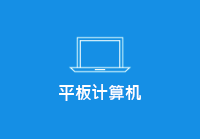
<style>
.page{position:relative;width:200px;height:139px;background:#158fe5}
.page>*{position:absolute;margin:0}
.t1{font:16.7px "MicrosoftJhengHeiBold";color:#ffffff}
</style>
<div class="page">
<p class="t1" style="left:59px;top:84px;width:82px;height:17px">平板计算机</p>
</div>
